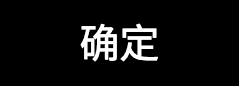
<style>
.page{position:relative;width:239px;height:86px;background:#000000}
.page>*{position:absolute;margin:0}
.t1{font:40px/40px "WebPSD-18463539-0-Regular";color:#ffffff}
</style>
<div class="page">
<p class="t1" style="left:0px;top:0px;width:239px;height:86px;text-align:center">确定</p>
</div>
